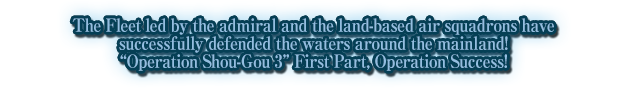
<style>
.page{position:relative;width:628px;height:89px;background:#ffffff}
.page>*{position:absolute;margin:0}
.t1{font:18px/18px "RyuminPro-ExBold";letter-spacing:-0.04em;color:#93bee0;scale:0.9 1}
</style>
<div class="page">
<p class="t1" style="left:72px;top:18px;width:482px;height:53px;text-align:center">The Fleet led by the admiral and the land-based air squadrons have<br>successfully defended the waters around the mainland!<br>“Operation Shou-Gou 3” First Part, Operation Success!</p>
</div>
